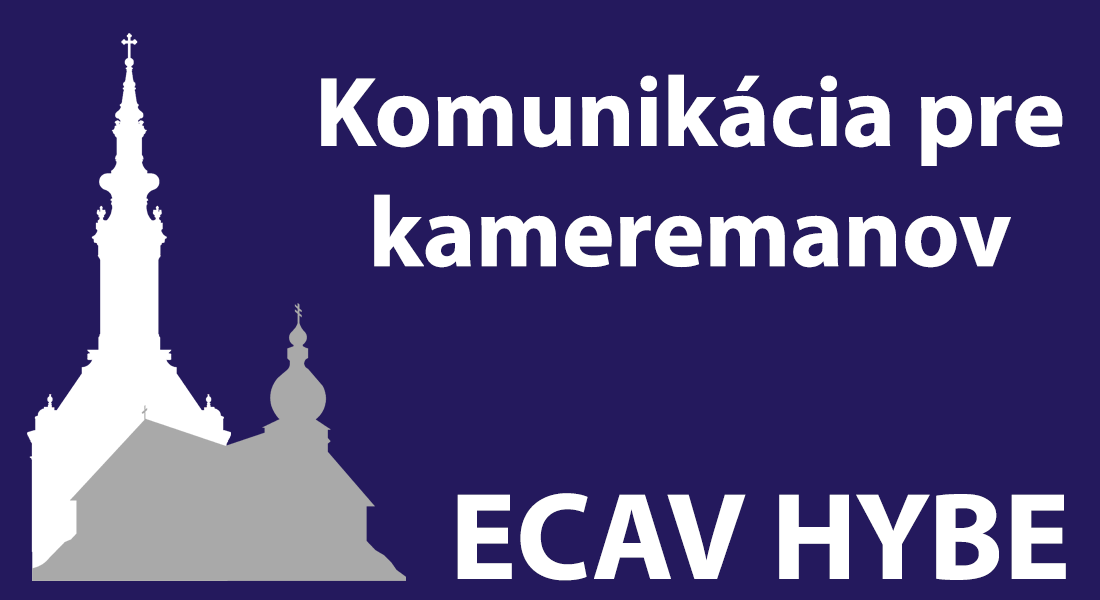
<style>
.page{position:relative;width:1100px;height:600px;background:#24195d}
.page>*{position:absolute;margin:0}
.t1{font:100px "MyriadPro-Bold";color:#ffffff}
.t2{font:125px "MyriadPro-Bold";color:#ffffff}
</style>
<div class="page">
<p class="t1" style="left:321px;top:74px;width:742px;height:194px;text-align:center">Komunikácia pre<br>kameremanov</p>
<p class="t2" style="left:457px;top:493px;width:609px;height:88px">ECAV HYBE</p>
</div>
